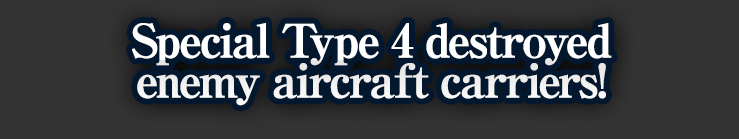
<style>
.page{position:relative;width:739px;height:139px;background:#333333}
.page>*{position:absolute;margin:0}
.t1{font:46px/40px "RyuminPro-ExBold";letter-spacing:-0.08em;color:#ffffff;font-weight:bold}
</style>
<div class="page">
<p class="t1" style="left:132px;top:23px;width:480px;height:83px;text-align:center">Special Type 4 destroyed<br>enemy aircraft carriers!</p>
</div>
